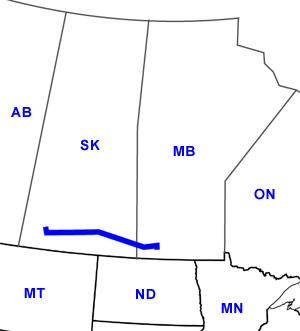
<style>
.page{position:relative;width:300px;height:331px;background:#ffffff}
.page>*{position:absolute;margin:0}
.t1{font:14px "Arial-BoldMT";letter-spacing:0.05em;color:#0000ff}
</style>
<div class="page">
<p class="t1" style="left:11px;top:107px;width:21px;height:10px">AB</p>
<p class="t1" style="left:80px;top:139px;width:20px;height:12px">SK</p>
<p class="t1" style="left:173px;top:146px;width:22px;height:10px">MB</p>
<p class="t1" style="left:254px;top:188px;width:21px;height:12px">ON</p>
<p class="t1" style="left:24px;top:288px;width:21px;height:10px">MT</p>
<p class="t1" style="left:136px;top:289px;width:20px;height:10px">ND</p>
<p class="t1" style="left:221px;top:303px;width:22px;height:10px">MN</p>
</div>
